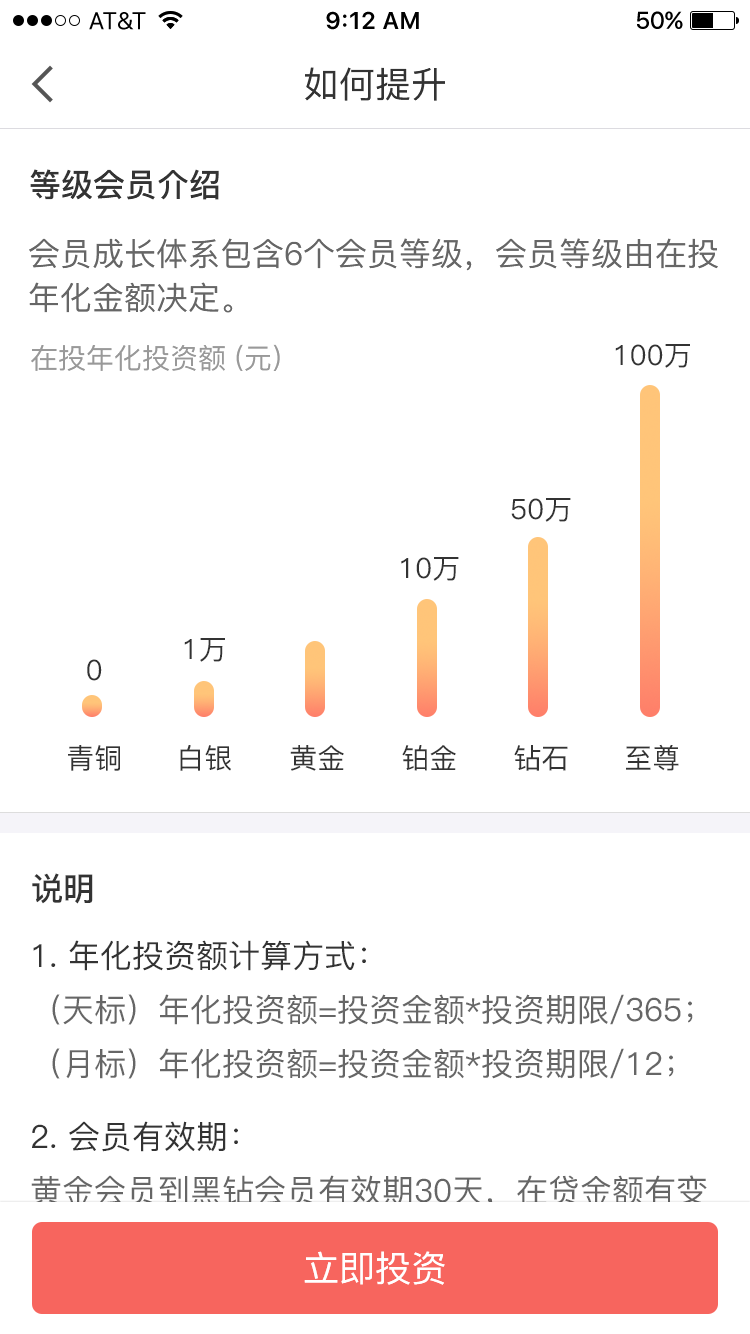
<style>
.page{position:relative;width:750px;height:1334px;background:#ffffff}
.page>*{position:absolute;margin:0}
.t1{font:36px "PingFang-SC-Medium";color:#333333}
.t2{font:32px "PingFang-SC-Bold";color:#333333}
.t3{font:32px/44px "PingFang-SC-Medium";color:#666666}
.t4{font:28px "PingFang-SC-Medium";color:#999999}
.t5{font:28.1px "PingFang-SC-Medium";color:#333333}
.t6{font:32px/54px "PingFang-SC-Medium";color:#666666}
.t7{font:32px/54px "PingFang-SC-Medium";color:#333333}
.t8{font:36px "PingFang-SC-Medium";color:#ffffff}
</style>
<div class="page">
<p class="t1" style="left:305px;top:67px;width:140px;height:34px">如何提升</p>
<p class="t2" style="left:30px;top:169px;width:189px;height:31px">等级会员介绍</p>
<p class="t3" style="left:29px;top:238px;width:689px;height:75px">会员成长体系包含6个会员等级，会员等级由在投年化金额决定。</p>
<p class="t4" style="left:31px;top:344px;width:249px;height:27px">在投年化投资额 (元)</p>
<p class="t5" style="left:615px;top:344px;width:75px;height:24px">100万</p>
<p class="t5" style="left:511px;top:498px;width:60px;height:24px">50万</p>
<p class="t5" style="left:401px;top:557px;width:58px;height:24px">10万</p>
<p class="t5" style="left:184px;top:638px;width:41px;height:24px">1万</p>
<p class="t5" style="left:87px;top:659px;width:15px;height:22px">0</p>
<p class="t5" style="left:68px;top:745px;width:52px;height:26px">青铜</p>
<p class="t5" style="left:180px;top:745px;width:51px;height:26px">白银</p>
<p class="t5" style="left:290px;top:745px;width:54px;height:26px">黄金</p>
<p class="t5" style="left:402px;top:745px;width:54px;height:26px">铂金</p>
<p class="t5" style="left:514px;top:745px;width:54px;height:26px">钻石</p>
<p class="t5" style="left:626px;top:744px;width:53px;height:27px">至尊</p>
<p class="t2" style="left:32px;top:873px;width:61px;height:31px">说明</p>
<p class="t6" style="left:33px;top:940px;width:660px;height:139px"><span class="t7">1. 年化投资额计算方式：<br></span>（天标）年化投资额=投资金额*投资期限/365；<br>（月标）年化投资额=投资金额*投资期限/12；</p>
<p class="t6" style="left:31px;top:1121px;width:676px;height:141px"><span class="t7">2. 会员有效期：<br></span>黄金会员到黑钻会员有效期30天，在贷金额有变动，系统会自动判断升降或保级。</p>
<p class="t8" style="left:304px;top:1251px;width:141px;height:34px">立即投资</p>
</div>
